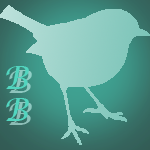
<style>
.page{position:relative;width:150px;height:150px}
.page>*{position:absolute;margin:0}
.t1{font:32px "LucidaCalligraphy-Italic";color:#52d5bf}
</style>
<div class="page">
<p class="t1" style="left:6px;top:66px;width:23px;height:55px">BB</p>
</div>
